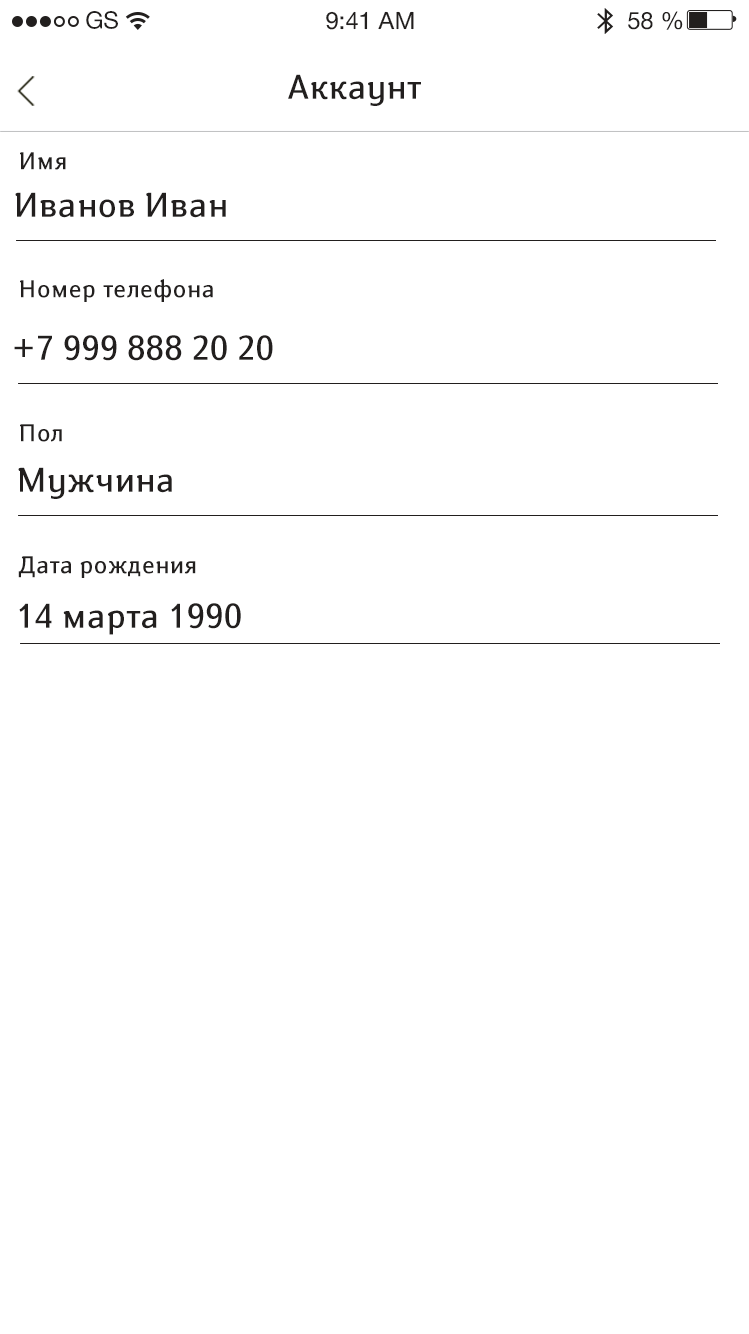
<style>
.page{position:relative;width:749px;height:1334px;background:#ffffff}
.page>*{position:absolute;margin:0}
.t1{font:24px "HelveticaNeueCyr-Roman";color:#221f1e}
.t2{font:34px "SusanBook-Regular";color:#221f1e}
.t3{font:24px "SusanBook-Regular";letter-spacing:0.016em;color:#221f1e}
.t4{font:34px "SusanBook-Regular";letter-spacing:0.016em;color:#221f1e}
</style>
<div class="page">
<p class="t1" style="left:86px;top:11px;width:32px;height:18px">GS</p>
<p class="t1" style="left:326px;top:11px;width:88px;height:19px">9:41 AM</p>
<p class="t1" style="left:628px;top:11px;width:55px;height:19px">58 %</p>
<p class="t2" style="left:288px;top:74px;width:133px;height:32px">Аккаунт</p>
<p class="t3" style="left:20px;top:152px;width:46px;height:18px">Имя</p>
<p class="t4" style="left:15px;top:192px;width:211px;height:26px">Иванов Иван</p>
<p class="t3" style="left:20px;top:279px;width:193px;height:23px">Номер телефона</p>
<p class="t4" style="left:14px;top:335px;width:259px;height:26px">+7 999 888 20 20</p>
<p class="t3" style="left:20px;top:424px;width:42px;height:18px">Пол</p>
<p class="t4" style="left:18px;top:467px;width:154px;height:32px">Мужчина</p>
<p class="t3" style="left:18px;top:556px;width:178px;height:22px">Дата рождения</p>
<p class="t4" style="left:19px;top:603px;width:222px;height:32px">14 марта 1990</p>
</div>
